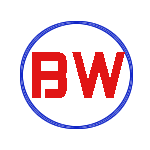
<style>
.page{position:relative;width:150px;height:150px;background:#ffffff}
.page>*{position:absolute;margin:0}
.t1{font:64.6px "LoganFive-Bold";color:#e11515}
</style>
<div class="page">
<p class="t1" style="left:32px;top:52px;width:93px;height:46px">BW</p>
</div>
